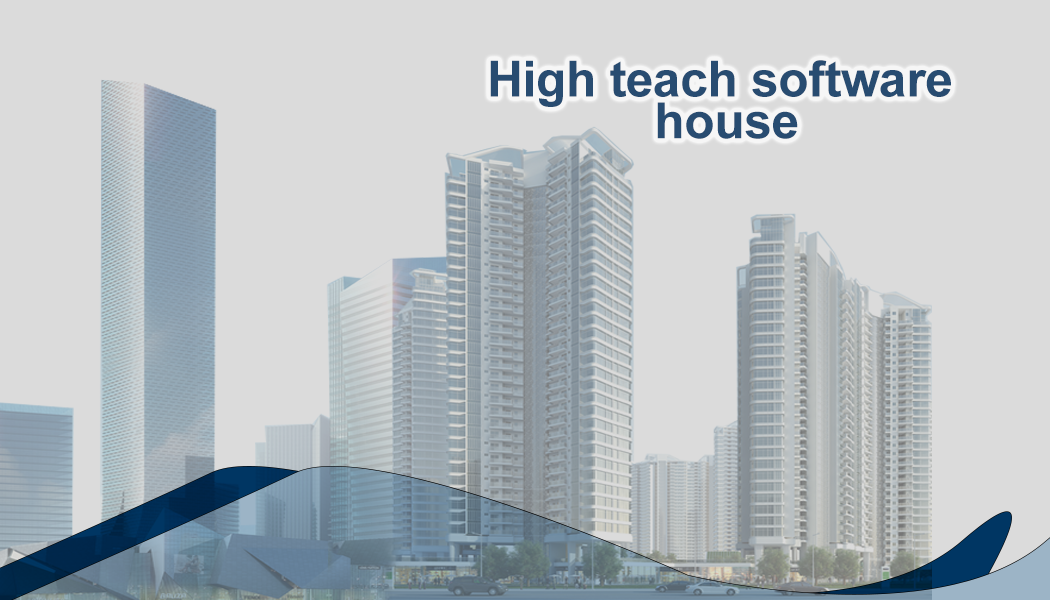
<style>
.page{position:relative;width:1050px;height:600px;background:#dbdbdb}
.page>*{position:absolute;margin:0}
.t1{font:50px/41.7px "Arial-BoldMT";letter-spacing:-0.01em;color:#284c71}
</style>
<div class="page">
<p class="t1" style="left:490px;top:60px;width:461px;height:79px;text-align:center">High teach software <br>house</p>
</div>
